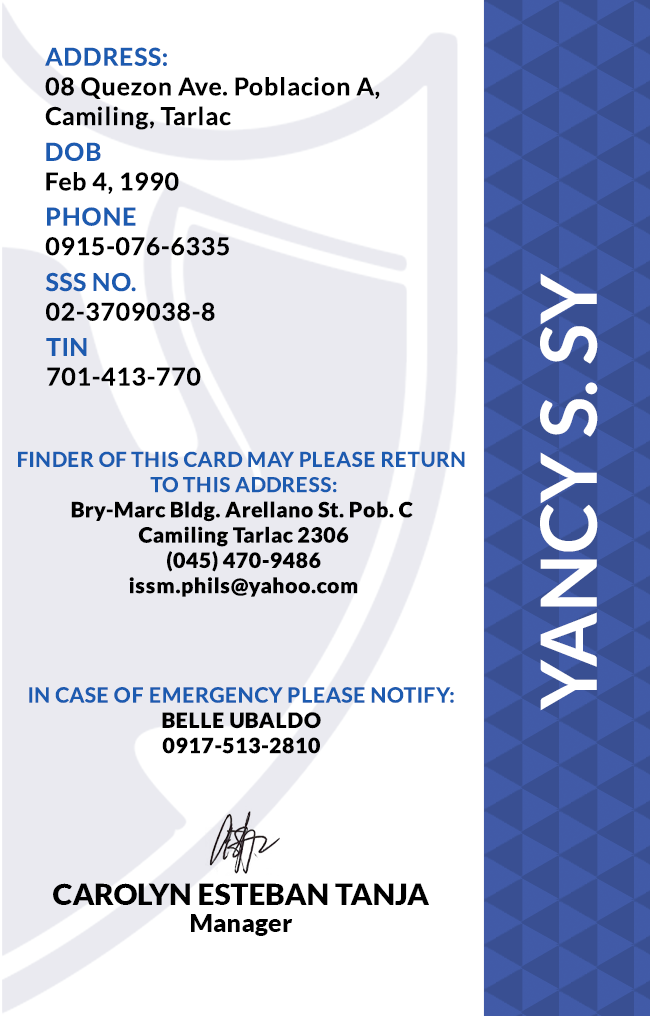
<style>
.page{position:relative;width:650px;height:1016px;background:#ffffff}
.page>*{position:absolute;margin:0}
.t1{font:24.7px/29.6px "Lato-Bold";letter-spacing:0.025em;color:#000000}
.t2{font:24.7px/29.6px "Lato-Bold";letter-spacing:0.025em}
.t3{font:77.6px "Lato-Bold";color:#ffffff}
.t4{font:21.1px "Lato-Black";letter-spacing:0.025em}
.t5{font:20.5px/25.3px "Lato-Bold";letter-spacing:0.025em;text-transform:uppercase}
.t6{font:21.1px/25.3px "Lato-Bold";letter-spacing:0.025em}
.t7{font:29.5px "Lato-Black";color:#000000}
.t8{font:25px "Lato-Black";color:#000000}
</style>
<div class="page">
<p class="t1" style="left:45px;top:47px;width:335px;height:83px">ADDRESS:<br>08 Quezon Ave. Poblacion A,<br>Camiling, Tarlac</p>
<p class="t2" style="left:46px;top:142px;width:133px;height:52px">DOB<br>Feb 4, 1990</p>
<p class="t2" style="left:45px;top:207px;width:184px;height:49px">PHONE <br>0915-076-6335</p>
<p class="t2" style="left:45px;top:272px;width:170px;height:49px">SSS NO.<br>02-3709038-8</p>
<p class="t3" style="left:540px;top:273px;width:58px;height:438px;rotate:-90deg">YANCY S. SY</p>
<p class="t1" style="left:46px;top:338px;width:155px;height:48px">TIN<br>701-413-770</p>
<p class="t4" style="left:18px;top:451px;width:447px;height:146px;text-align:center"><span class="t5">Finder of this card may please return <br>to this address:<br></span>Bry-Marc Bldg. Arellano St. Pob. C <br>Camiling Tarlac 2306<br>(045) 470-9486<br>issm.phils@yahoo.com</p>
<p class="t6" style="left:29px;top:687px;width:425px;height:67px;text-align:center">IN CASE OF EMERGENCY PLEASE NOTIFY:<br><span class="t4">BELLE UBALDO<br>0917-513-2810</span></p>
<p class="t7" style="left:53px;top:883px;width:376px;height:22px">CAROLYN ESTEBAN TANJA</p>
<p class="t8" style="left:191px;top:914px;width:102px;height:22px">Manager</p>
</div>
